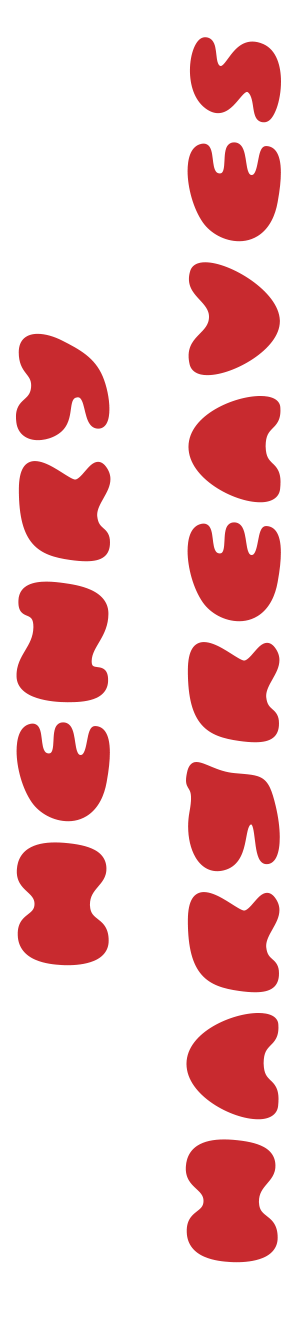
<style>
.page{position:relative;width:300px;height:1335px;background:#ffffff}
.page>*{position:absolute;margin:0}
.t1{font:126.1px "HHFluidRegular";color:#c82a2f;font-weight:bold;scale:1.53 1}
</style>
<div class="page">
<p class="t1" style="left:15px;top:37px;width:266px;height:1226px;text-align:center;rotate:-90deg">HENRY<br>HARGREAVES</p>
</div>
